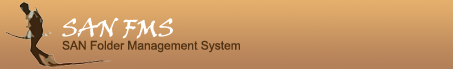
<style>
.page{position:relative;width:453px;height:69px}
.page>*{position:absolute;margin:0}
.t1{font:24px "VinerHandITC";color:#ffffff}
.t2{font:12px "ArialMT";color:#523315}
</style>
<div class="page">
<p class="t1" style="left:62px;top:17px;width:111px;height:22px">SAN FMS</p>
<p class="t2" style="left:62px;top:40px;width:178px;height:13px">SAN Folder Management System</p>
</div>
